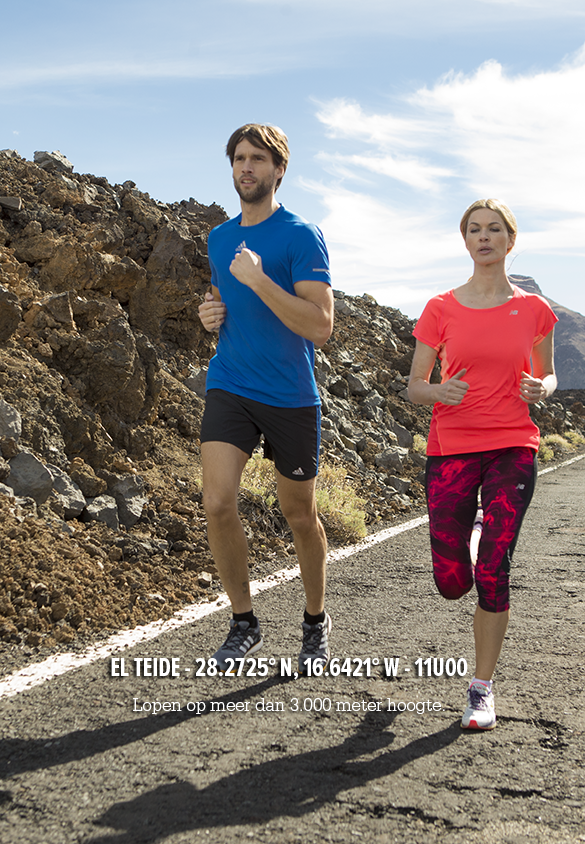
<style>
.page{position:relative;width:585px;height:844px}
.page>*{position:absolute;margin:0}
.t1{font:26.7px/17.1px "ProximaNovaExCn-Bold";color:#ffffff;scale:0.96 1}
.t2{font:19.2px/17.1px "SerifaStd-Light";color:#ffffff;scale:0.96 1}
</style>
<div class="page">
<p class="t1" style="left:111px;top:658px;width:357px;height:56px;text-align:center">EL TEIDE - 28.2725° N, 16.6421° W - 11U00<br><br><span class="t2">Lopen op meer dan 3.000 meter hoogte.</span></p>
</div>
